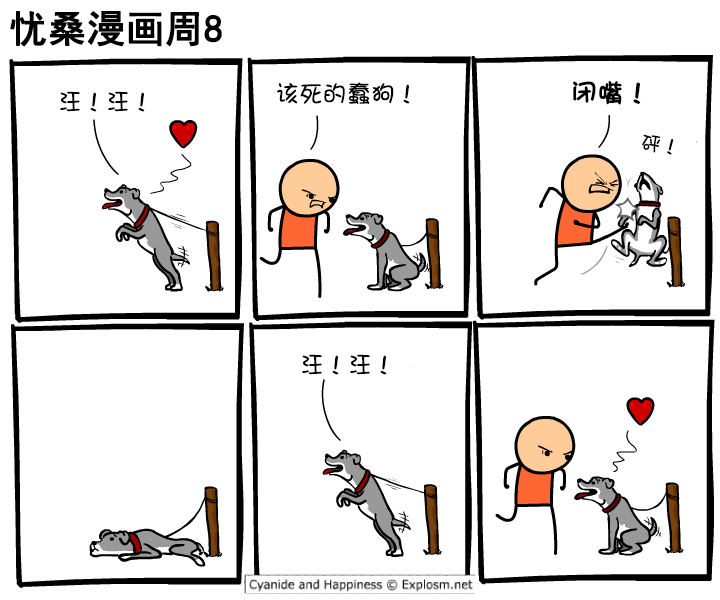
<style>
.page{position:relative;width:720px;height:600px;background:#ffffff}
.page>*{position:absolute;margin:0}
.t1{font:38px "SimHei";color:#000000;font-weight:bold}
.t2{font:24px "DFGirl";color:#000000}
.t3{font:26px "DFGirl";color:#000000;font-weight:bold}
.t4{font:20px "DFGirl";color:#000000}
</style>
<div class="page">
<p class="t1" style="left:10px;top:11px;width:212px;height:36px">忧桑漫画周8</p>
<p class="t2" style="left:277px;top:82px;width:133px;height:23px">该死的蠢狗！</p>
<p class="t3" style="left:572px;top:80px;width:69px;height:25px">闭嘴！</p>
<p class="t2" style="left:60px;top:91px;width:85px;height:21px">汪！汪！</p>
<p class="t4" style="left:642px;top:134px;width:32px;height:21px;rotate:7deg">砰！</p>
<p class="t2" style="left:302px;top:354px;width:85px;height:21px">汪！汪！</p>
</div>
